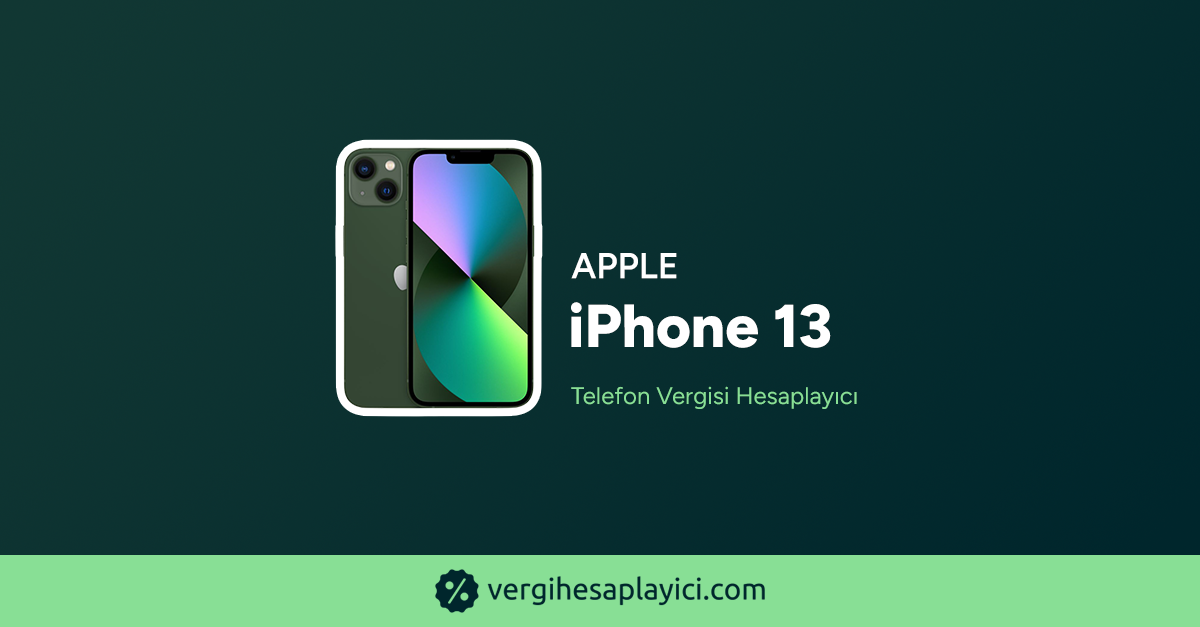
<style>
.page{position:relative;width:1200px;height:627px}
.page>*{position:absolute;margin:0}
.t1{font:36px "Figtree-SemiBold";color:#ffffff;text-transform:uppercase;font-weight:bold}
.t2{font:60.3px "Figtree-ExtraBold";color:#ffffff;font-weight:bold}
.t3{font:24px "Figtree-Regular";color:#88df95;font-weight:bold}
</style>
<div class="page">
<p class="t1" style="left:571px;top:253px;width:106px;height:26px">Apple</p>
<p class="t2" style="left:571px;top:302px;width:260px;height:46px">iPhone 13</p>
<p class="t3" style="left:571px;top:386px;width:286px;height:23px">Telefon Vergisi Hesaplayıcı</p>
</div>
